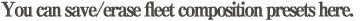
<style>
.page{position:relative;width:363px;height:21px;background:#ffffff}
.page>*{position:absolute;margin:0}
.t1{font:20px "RyuminPro-ExBold";letter-spacing:-0.12em;color:#4c4842;font-weight:bold;scale:0.9 1}
</style>
<div class="page">
<p class="t1" style="left:1px;top:1px;width:353px;height:19px">You can save/erase fleet composition presets here.</p>
</div>
